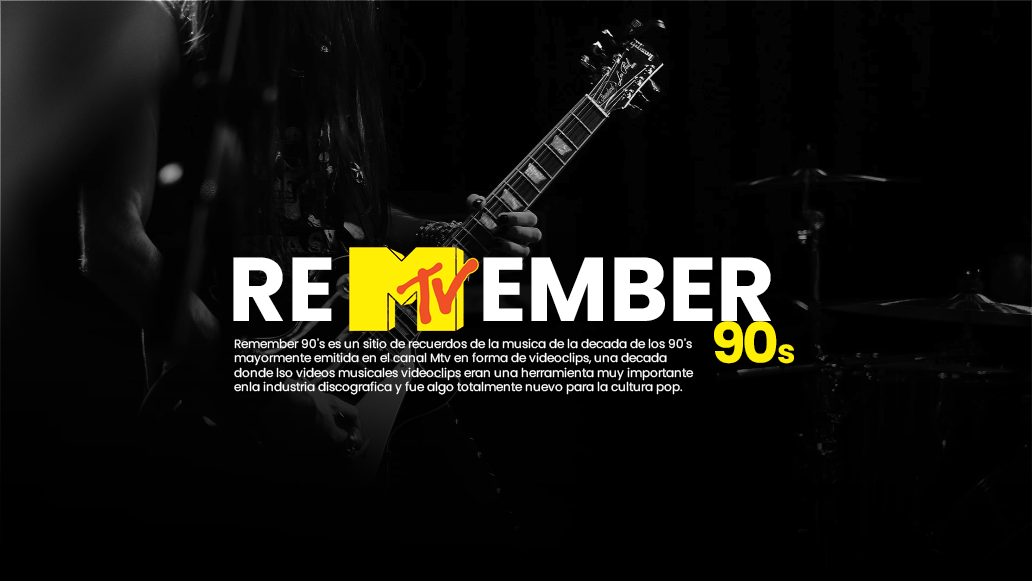
<style>
.page{position:relative;width:1032px;height:581px;background:#000000}
.page>*{position:absolute;margin:0}
.t1{font:90.5px "Poppins-Bold";color:#ffffff}
.t2{font:56px "Poppins-Bold";letter-spacing:-0.05em;color:#ffef05}
.t3{font:12px "Poppins-Regular";color:#ffffff}
.t4{font:33px "Poppins-Bold";letter-spacing:-0.05em;color:#ffef05}
</style>
<div class="page">
<p class="t1" style="left:233px;top:257px;width:99px;height:64px">RE</p>
<p class="t1" style="left:483px;top:257px;width:288px;height:64px">EMBER</p>
<p class="t2" style="left:714px;top:321px;width:63px;height:43px">90</p>
<p class="t3" style="left:234px;top:338px;width:460px;height:57px">Remember 90's es un sitio de recuerdos de la musica de la decada de los 90's mayormente emitida en el canal Mtv en forma de videoclips, una decada donde lso videos musicales videoclips eran una herramienta muy importante enla industria discografica y fue algo totalmente nuevo para la cultura pop.</p>
<p class="t4" style="left:778px;top:344px;width:16px;height:20px">s</p>
</div>
